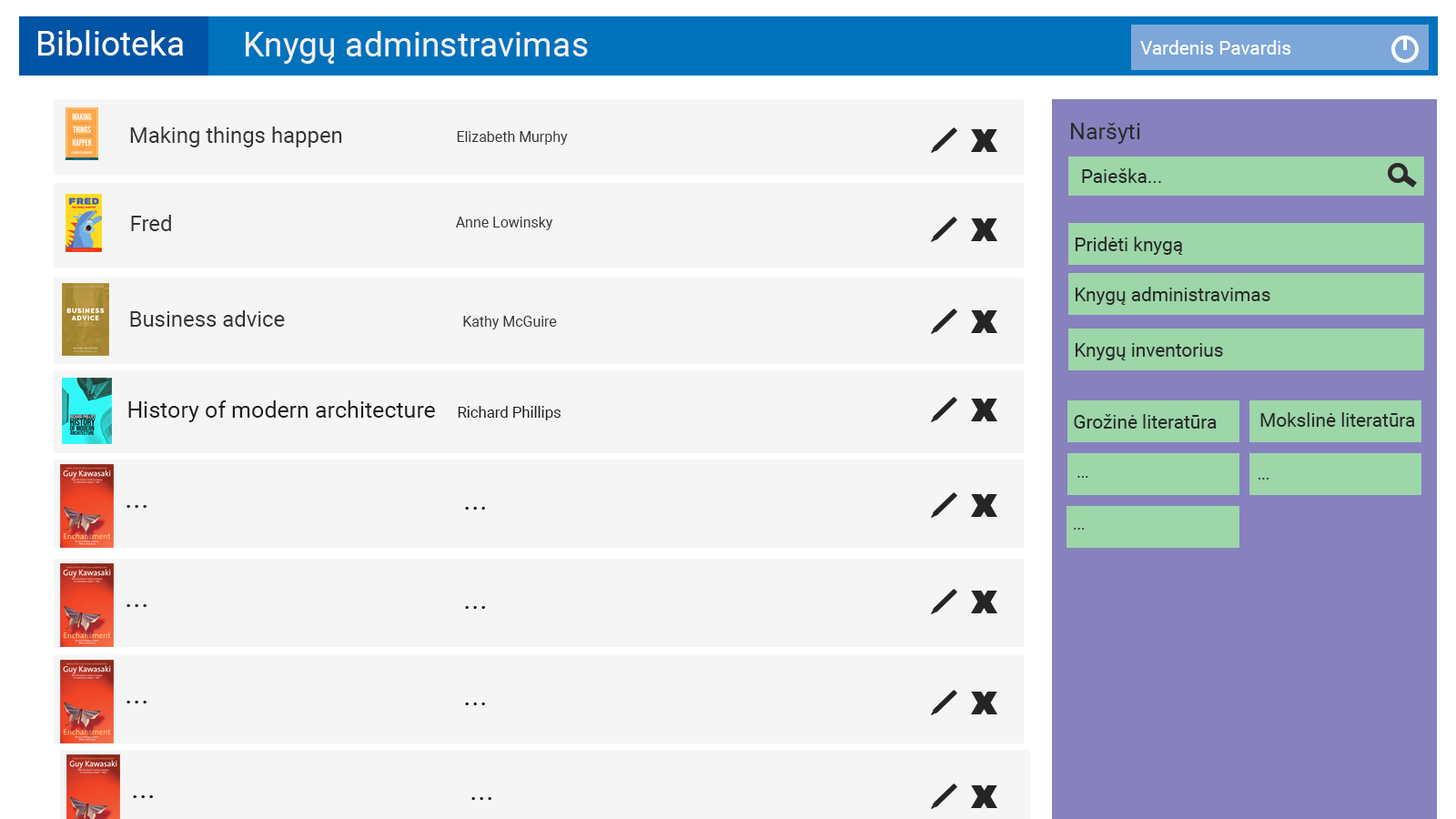
<style>
.page{position:relative;width:1456px;height:819px;background:#f5f5f5}
.page>*{position:absolute;margin:0}
.t1{font:34.1px "Roboto-Regular";color:#ffffff}
.t2{font:34.1px "Roboto-Regular";color:#f2f2f2}
.t3{font:19px "Roboto-Regular";color:#ffffff}
.t4{font:22.7px "Roboto-Regular";color:#292929}
.t5{font:21.7px "Roboto-Regular";color:#343434}
.t6{font:14.5px "Roboto-Regular";color:#343434}
.t7{font:19px "Roboto-Regular";color:#262626}
.t8{font:19px "Roboto-Regular";color:#292929}
.t9{font:22.7px "Roboto-Regular";color:#1d1d1d}
.t10{font:15.2px "Roboto-Regular";color:#1d1d1d}
.t11{font:15.2px "Roboto-Regular";color:#292929}
.t12{font:30.3px "Roboto-Regular";color:#1d1d1d}
</style>
<div class="page">
<p class="t1" style="left:38px;top:30px;width:146px;height:26px">Biblioteka</p>
<p class="t2" style="left:246px;top:31px;width:342px;height:33px">Knygų adminstravimas</p>
<p class="t3" style="left:1140px;top:40px;width:151px;height:15px">Vardenis Pavardis</p>
<p class="t4" style="left:1071px;top:123px;width:69px;height:21px">Naršyti</p>
<p class="t5" style="left:130px;top:126px;width:212px;height:21px">Making things happen</p>
<p class="t6" style="left:457px;top:131px;width:111px;height:14px">Elizabeth Murphy</p>
<p class="t7" style="left:1082px;top:168px;width:79px;height:15px">Paieška...</p>
<p class="t5" style="left:131px;top:215px;width:40px;height:16px">Fred</p>
<p class="t6" style="left:456px;top:217px;width:97px;height:13px">Anne Lowinsky</p>
<p class="t8" style="left:1075px;top:237px;width:107px;height:18px">Pridėti knygą</p>
<p class="t8" style="left:1075px;top:287px;width:195px;height:18px">Knygų administravimas</p>
<p class="t5" style="left:130px;top:310px;width:155px;height:17px">Business advice</p>
<p class="t6" style="left:463px;top:316px;width:94px;height:13px">Kathy McGuire</p>
<p class="t8" style="left:1075px;top:343px;width:148px;height:17px">Knygų inventorius</p>
<p class="t9" style="left:128px;top:400px;width:307px;height:22px">History of modern architecture</p>
<p class="t10" style="left:458px;top:406px;width:103px;height:14px">Richard Phillips</p>
<p class="t8" style="left:1260px;top:412px;width:155px;height:15px">Mokslinė literatūra</p>
<p class="t8" style="left:1074px;top:414px;width:143px;height:15px">Grožinė literatūra</p>
<p class="t11" style="left:1077px;top:476px;width:11px;height:2px">...</p>
<p class="t11" style="left:1259px;top:478px;width:10px;height:2px">...</p>
<p class="t12" style="left:126px;top:505px;width:21px;height:3px">...</p>
<p class="t12" style="left:465px;top:507px;width:20px;height:3px">...</p>
<p class="t11" style="left:1074px;top:528px;width:10px;height:2px">...</p>
<p class="t12" style="left:126px;top:604px;width:21px;height:3px">...</p>
<p class="t12" style="left:465px;top:606px;width:20px;height:3px">...</p>
<p class="t12" style="left:126px;top:701px;width:21px;height:2px">...</p>
<p class="t12" style="left:465px;top:703px;width:20px;height:2px">...</p>
<p class="t12" style="left:133px;top:795px;width:20px;height:3px">...</p>
<p class="t12" style="left:471px;top:797px;width:20px;height:3px">...</p>
</div>
